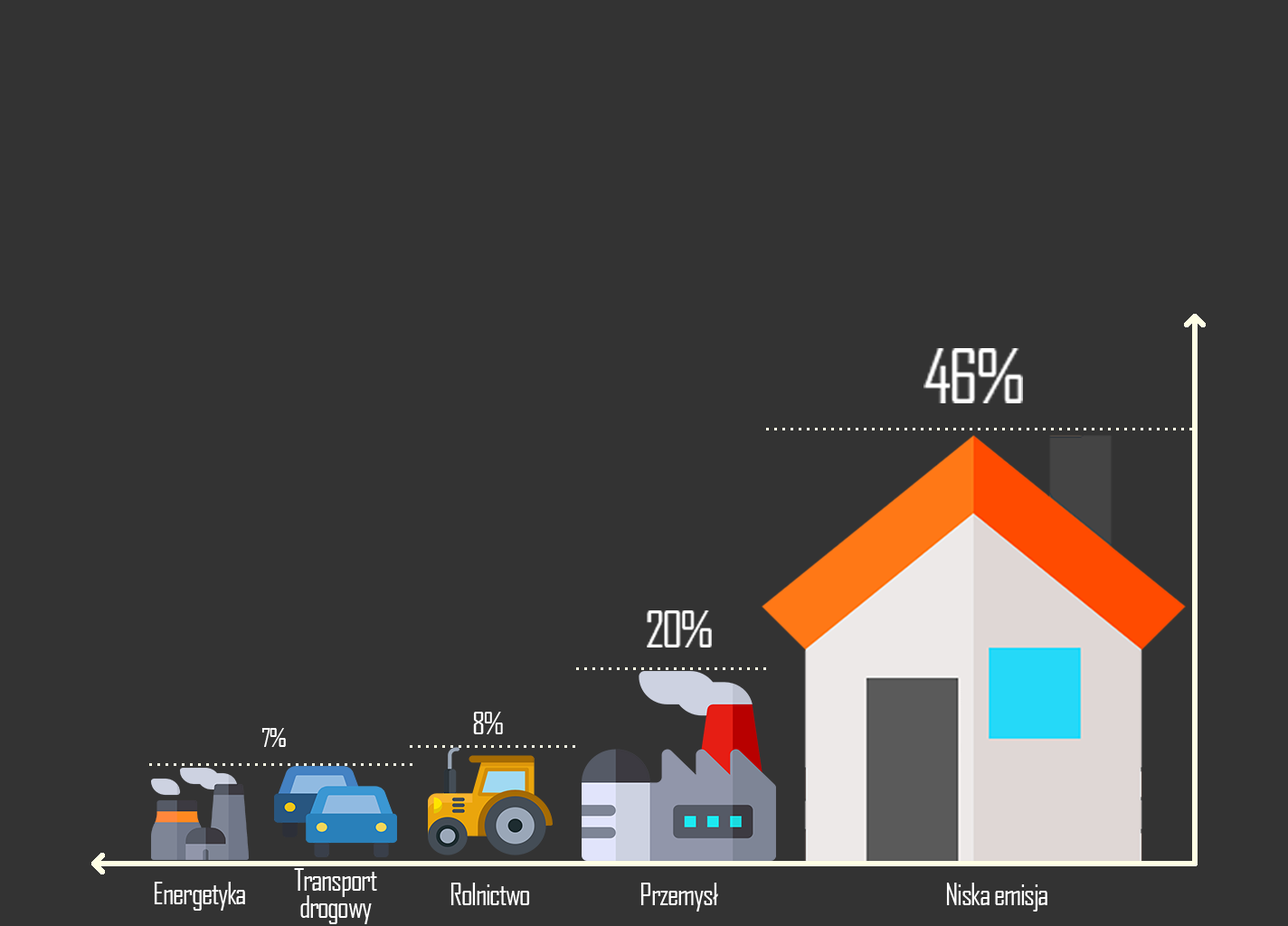
<style>
.page{position:relative;width:1288px;height:926px;background:#333333}
.page>*{position:absolute;margin:0}
.t1{font:29.7px "AgencyFB-Reg";letter-spacing:-0.04em;color:#ffffff}
.t2{font:25.2px "AgencyFB-Reg";letter-spacing:-0.04em;color:#ffffff}
.t3{font:29.7px/27.2px "AgencyFB-Reg";letter-spacing:-0.04em;color:#ffffff}
</style>
<div class="page">
<p class="t1" style="left:473px;top:712px;width:30px;height:22px">8%</p>
<p class="t2" style="left:261px;top:728px;width:25px;height:19px">7%</p>
<p class="t3" style="left:294px;top:868px;width:83px;height:56px;text-align:center">Transport drogowy</p>
<p class="t1" style="left:154px;top:882px;width:91px;height:29px">Energetyka</p>
<p class="t1" style="left:450px;top:883px;width:80px;height:22px">Rolnictwo</p>
<p class="t1" style="left:640px;top:883px;width:78px;height:29px">Przemysł</p>
<p class="t1" style="left:946px;top:883px;width:101px;height:29px">Niska emisja</p>
</div>
